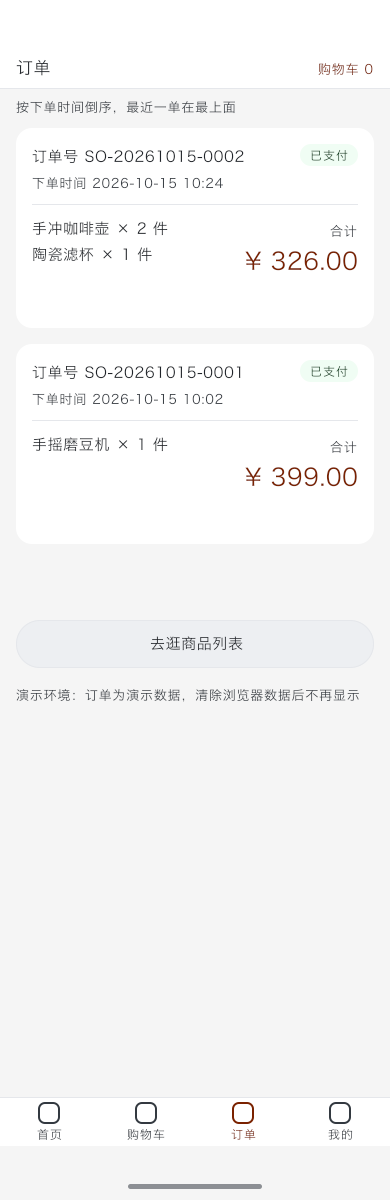
<style>
.page{position:relative;width:390px;height:1200px;background:#f5f5f5}
.page>*{position:absolute;margin:0}
.t1{font:17px "HiraginoSansGB-Regular";letter-spacing:0.03em;color:#2d3035}
.t2{font:13px "HiraginoSansGB-Regular";letter-spacing:0.06em;color:#82361c}
.t3{font:13px "HiraginoSansGB-Regular";letter-spacing:0.06em;color:#3f444a}
.t4{font:15px "HiraginoSansGB-Regular";letter-spacing:0.04em;color:#1f2329}
.t5{font:12px "HiraginoSansGB-Regular";letter-spacing:0.08em;color:#083d19}
.t6{font:13px "HiraginoSansGB-Regular";letter-spacing:0.06em;color:#3b4147}
.t7{font:15px "HiraginoSansGB-Regular";letter-spacing:0.04em;color:#292c32}
.t8{font:13px "HiraginoSansGB-Regular";letter-spacing:0.06em}
.t9{font:15px "HiraginoSansGB-Regular";letter-spacing:0.04em;color:#23272c}
.t10{font:24px "HiraginoSansGB-Regular";letter-spacing:0.022em;color:#7a2200}
.t11{font:13px "HiraginoSansGB-Regular";letter-spacing:0.06em;color:#3a4046}
.t12{font:15px "HiraginoSansGB-Regular";letter-spacing:0.04em;color:#2b2e33}
.t13{font:15px "HiraginoSansGB-Regular";letter-spacing:0.04em;color:#2c2f34}
.t14{font:13px "HiraginoSansGB-Regular";letter-spacing:0.06em;color:#3b4047}
.t15{font:12px "HiraginoSansGB-Regular";letter-spacing:0.08em}
.t16{font:12px "HiraginoSansGB-Regular";letter-spacing:0.08em;color:#43484e}
</style>
<div class="page">
<p class="t1" style="left:15px;top:59px;width:36px;height:18px">订单</p>
<p class="t2" style="left:317px;top:63px;width:57px;height:14px">购物车 0</p>
<p class="t3" style="left:15px;top:101px;width:221px;height:14px">按下单时间倒序，最近一单在最上面</p>
<p class="t4" style="left:31px;top:149px;width:214px;height:16px">订单号 SO-20261015-0002</p>
<p class="t5" style="left:310px;top:149px;width:39px;height:13px">已支付</p>
<p class="t6" style="left:31px;top:177px;width:193px;height:13px">下单时间 2026-10-15 10:24</p>
<p class="t7" style="left:31px;top:221px;width:138px;height:16px">手冲咖啡壶 × 2 件</p>
<p class="t8" style="left:329px;top:224px;width:29px;height:14px">合计</p>
<p class="t9" style="left:32px;top:247px;width:121px;height:16px">陶瓷滤杯 × 1 件</p>
<p class="t10" style="left:244px;top:251px;width:114px;height:21px">¥ 326.00</p>
<p class="t4" style="left:31px;top:365px;width:211px;height:16px">订单号 SO-20261015-0001</p>
<p class="t5" style="left:310px;top:365px;width:39px;height:13px">已支付</p>
<p class="t11" style="left:31px;top:393px;width:193px;height:13px">下单时间 2026-10-15 10:02</p>
<p class="t12" style="left:31px;top:437px;width:138px;height:16px">手摇磨豆机 × 1 件</p>
<p class="t8" style="left:329px;top:440px;width:29px;height:14px">合计</p>
<p class="t10" style="left:244px;top:467px;width:114px;height:21px">¥ 399.00</p>
<p class="t13" style="left:149px;top:636px;width:95px;height:16px">去逛商品列表</p>
<p class="t14" style="left:15px;top:688px;width:345px;height:15px">演示环境：订单为演示数据，清除浏览器数据后不再显示</p>
<p class="t15" style="left:36px;top:1128px;width:27px;height:13px">首页</p>
<p class="t16" style="left:126px;top:1128px;width:40px;height:13px">购物车</p>
<p class="t15" style="left:230px;top:1129px;width:27px;height:12px">订单</p>
<p class="t15" style="left:327px;top:1129px;width:27px;height:12px">我的</p>
</div>
